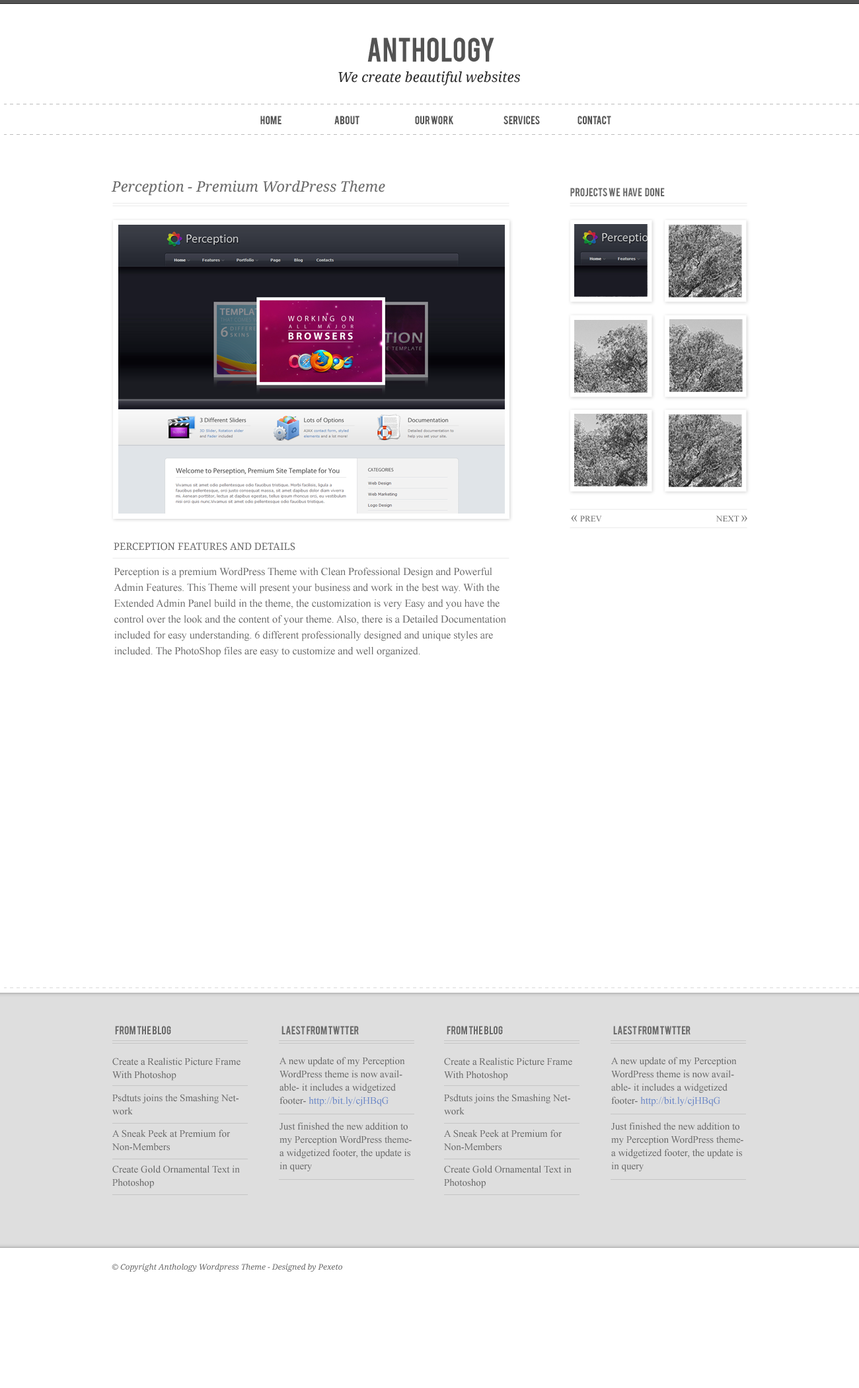
<style>
.page{position:relative;width:859px;height:1388px;background:#ffffff}
.page>*{position:absolute;margin:0}
.t1{font:26.4px "Bebas";color:#535353}
.t2{font:13.9px "DroidSerif-Italic";color:#2c2c2c}
.t3{font:9.3px "Bebas";color:#535353}
.t4{font:14.5px "DroidSerif-Italic";color:#6a6a6a}
.t5{font:9.3px "Bebas";color:#6a6a6a;text-transform:uppercase}
.t6{font:8.6px "TimesNewRomanPSMT";color:#6a6a6a}
.t7{font:13.9px "TimesNewRomanPSMT";color:#6a6a6a}
.t8{font:13.2px "TimesNewRomanPSMT";color:#6a6a6a}
.t9{font:9.9px "DroidSerif";color:#6a6a6a;text-transform:uppercase}
.t10{font:10.6px/15.9px "TimesNewRomanPSMT";color:#6a6a6a}
.t11{font:9.3px "Bebas";color:#6a6a6a}
.t12{font:9.9px/13.2px "TimesNewRomanPSMT";color:#696969}
.t13{font:9.9px/13.2px "TimesNewRomanPSMT";color:#6885c6}
.t14{font:7.9px "DroidSerif-Italic";color:#6a6a6a}
</style>
<div class="page">
<p class="t1" style="left:367px;top:38px;width:127px;height:24px">Anthology</p>
<p class="t2" style="left:338px;top:71px;width:182px;height:14px">We create beautiful websites</p>
<p class="t3" style="left:260px;top:116px;width:22px;height:8px">HOME</p>
<p class="t3" style="left:334px;top:116px;width:26px;height:8px">ABOUT</p>
<p class="t3" style="left:415px;top:116px;width:38px;height:8px">our work</p>
<p class="t3" style="left:504px;top:116px;width:36px;height:8px">services</p>
<p class="t3" style="left:578px;top:116px;width:33px;height:8px">contact</p>
<p class="t4" style="left:111px;top:180px;width:274px;height:16px">Perception - Premium WordPress Theme</p>
<p class="t5" style="left:570px;top:188px;width:95px;height:8px">Projects we   have   done</p>
<p class="t6" style="left:571px;top:515px;width:31px;height:7px"><span class="t7">«</span> PREV</p>
<p class="t6" style="left:716px;top:515px;width:31px;height:7px">NEXT <span class="t8">»</span></p>
<p class="t9" style="left:114px;top:543px;width:181px;height:8px">Perception Features and Details</p>
<p class="t10" style="left:114px;top:567px;width:392px;height:90px">Perception is a premium WordPress Theme with Clean Professional Design and Powerful Admin Features. This Theme will present your business and work in the best way. With the Extended Admin Panel build in the theme, the customization is very Easy and you have the control over the look and the content of your theme. Also, there is a Detailed Documentation included for easy understanding. 6 different professionally designed and unique styles are included. The PhotoShop files are easy to customize and well organized.</p>
<p class="t11" style="left:115px;top:1026px;width:56px;height:8px">From the Blog</p>
<p class="t11" style="left:282px;top:1026px;width:77px;height:8px">laest from TWTTER</p>
<p class="t11" style="left:447px;top:1026px;width:56px;height:8px">From the Blog</p>
<p class="t11" style="left:613px;top:1026px;width:78px;height:8px">laest from TWTTER</p>
<p class="t12" style="left:112px;top:1057px;width:129px;height:24px">Create a Realistic Picture Frame With Photoshop</p>
<p class="t12" style="left:280px;top:1057px;width:125px;height:49px">A new update of my Perception WordPress theme is now available- it includes a widgetized footer- <span class="t13">http://bit.ly/cjHBqG</span></p>
<p class="t12" style="left:444px;top:1057px;width:128px;height:24px">Create a Realistic Picture Frame With Photoshop</p>
<p class="t12" style="left:611px;top:1057px;width:126px;height:49px">A new update of my Perception WordPress theme is now available- it includes a widgetized footer- <span class="t13">http://bit.ly/cjHBqG</span></p>
<p class="t12" style="left:112px;top:1094px;width:127px;height:21px">Psdtuts joins the Smashing Network</p>
<p class="t12" style="left:444px;top:1094px;width:126px;height:21px">Psdtuts joins the Smashing Network</p>
<p class="t12" style="left:112px;top:1129px;width:118px;height:22px">A Sneak Peek at Premium for Non-Members</p>
<p class="t12" style="left:280px;top:1122px;width:132px;height:50px">Just finished the new addition to my Perception WordPress theme- a widgetized footer, the update is in query</p>
<p class="t12" style="left:443px;top:1129px;width:119px;height:22px">A Sneak Peek at Premium for Non-Members</p>
<p class="t12" style="left:611px;top:1122px;width:133px;height:50px">Just finished the new addition to my Perception WordPress theme- a widgetized footer, the update is in query</p>
<p class="t12" style="left:112px;top:1165px;width:128px;height:23px">Create Gold Ornamental Text in Photoshop</p>
<p class="t12" style="left:444px;top:1165px;width:128px;height:23px">Create Gold Ornamental Text in Photoshop</p>
<p class="t14" style="left:112px;top:1264px;width:230px;height:8px">© Copyright Anthology Wordpress Theme - Designed by Pexeto</p>
</div>
